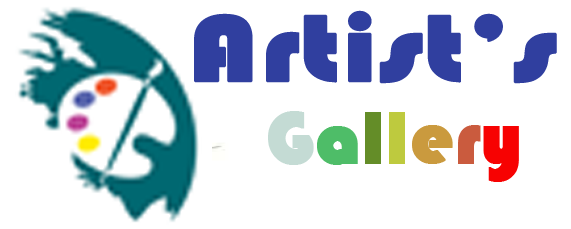
<style>
.page{position:relative;width:571px;height:229px;background:#ffffff}
.page>*{position:absolute;margin:0}
.t1{font:96.9px "Bauhaus93";color:#303f9f;font-weight:bold;scale:1.2 1}
.t2{font:76.2px "Bauhaus93";color:#c4dbd4;font-weight:bold}
.t3{font:76.2px "Bauhaus93";color:#4ebd68;font-weight:bold}
.t4{font:76.2px "Bauhaus93";color:#648d28;font-weight:bold}
.t5{font:76.2px "Bauhaus93";color:#beca3e;font-weight:bold}
.t6{font:76.2px "Bauhaus93";color:#ca9a3e;font-weight:bold}
.t7{font:76.2px "Bauhaus93";color:#ca5b3e;font-weight:bold}
.t8{font:76.2px "Bauhaus93";color:#f70202;font-weight:bold}
</style>
<div class="page">
<p class="t1" style="left:194px;top:10px;width:363px;height:74px">Artist’s</p>
<p class="t2" style="left:268px;top:111px;width:251px;height:71px">G<span class="t3">a</span><span class="t4">l</span><span class="t5">l</span><span class="t6">e</span><span class="t7">r</span><span class="t8">y</span></p>
</div>
